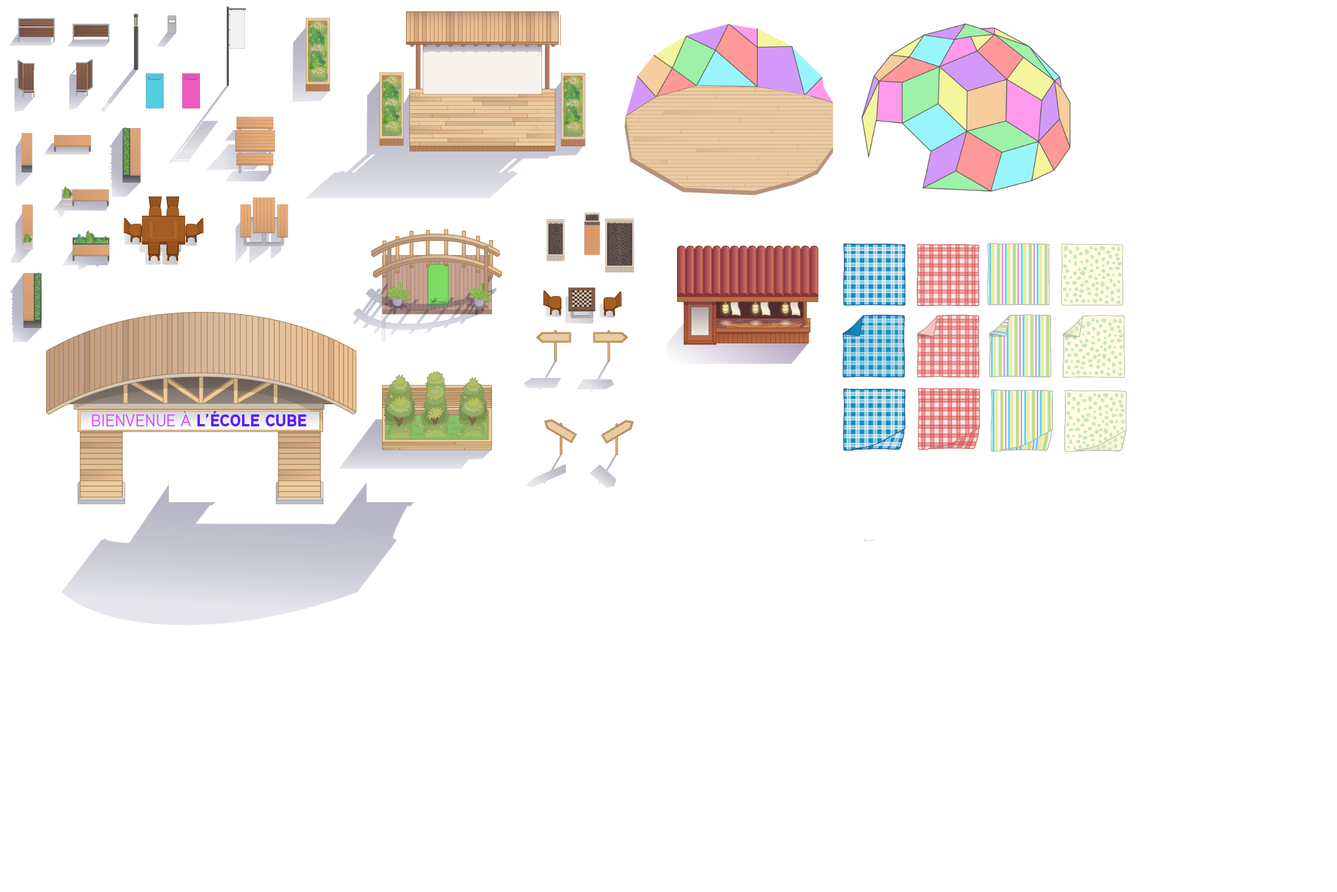
<style>
.page{position:relative;width:1337px;height:892px;background:#ffffff}
.page>*{position:absolute;margin:0}
.t1{font:16.7px "AauxNext-Black";color:#5b1dff}
.t2{font:16.7px "AauxNext-Medium";color:#d750ff}
</style>
<div class="page">
<p class="t1" style="left:92px;top:411px;width:214px;height:15px"><span class="t2">BIENVENUE À </span>L’ÉCOLE CUBE</p>
</div>
